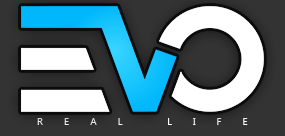
<style>
.page{position:relative;width:285px;height:136px;background:#333333}
.page>*{position:absolute;margin:0}
.t1{font:10.4px "Ebrima";letter-spacing:2em;color:#f3f3f3}
</style>
<div class="page">
<p class="t1" style="left:37px;top:118px;width:211px;height:7px">REAL LIFE</p>
</div>
